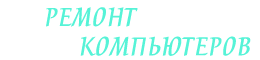
<style>
.page{position:relative;width:260px;height:60px;background:#ffffff}
.page>*{position:absolute;margin:0}
.t1{font:30px "Breeze";color:#56f3d7}
</style>
<div class="page">
<p class="t1" style="left:46px;top:7px;width:92px;height:20px">РЕМОНТ</p>
<p class="t1" style="left:80px;top:36px;width:171px;height:20px">КОМПЬЮТЕРОВ</p>
</div>
